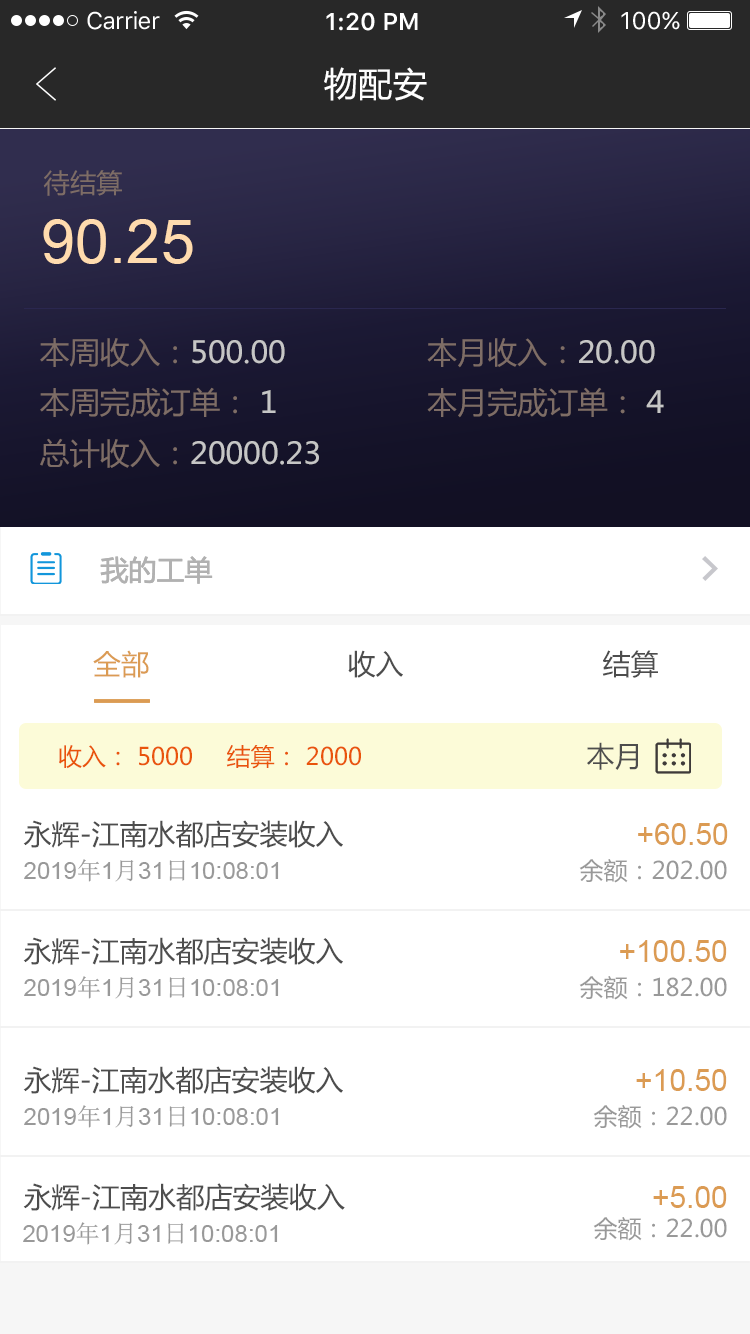
<style>
.page{position:relative;width:750px;height:1334px;background:#ffffff}
.page>*{position:absolute;margin:0}
.t1{font:24px "SFUIText-Regular";letter-spacing:-0.025em;color:#ffffff}
.t2{font:24px "SFUIText-Semibold";color:#ffffff}
.t3{font:24px "SFUIText-Regular";color:#ffffff}
.t4{font:34px "MicrosoftYaHei";letter-spacing:0.02em;color:#ffffff}
.t5{font:26px "MicrosoftYaHei";color:#7e6d66}
.t6{font:61.1px "ArialMT";color:#ffdbae}
.t7{font:30px/60px "MicrosoftYaHei";color:#c6c6c6}
.t8{font:30px/60px "MicrosoftYaHei";color:#7e6d66}
.t9{font:28px "MicrosoftYaHei";color:#b1b1b1}
.t10{font:28px "MicrosoftYaHei";color:#db9b53}
.t11{font:28px "MicrosoftYaHei";color:#4d4d4d}
.t12{font:24px "MicrosoftYaHei";color:#e9540b}
.t13{font:30px "ArialMT";color:#db9b53}
.t14{font:24px "ArialMT";color:#999999}
.t15{font:24px "SimSun";color:#999999}
.t16{font:24px "MicrosoftYaHei";color:#999999}
.t17{font:28.1px "MicrosoftYaHei";color:#4d4d4d}
</style>
<div class="page">
<p class="t1" style="left:87px;top:11px;width:73px;height:19px">Carrier</p>
<p class="t2" style="left:326px;top:12px;width:92px;height:19px">1:20 PM</p>
<p class="t3" style="left:621px;top:11px;width:59px;height:19px">100%</p>
<p class="t4" style="left:324px;top:67px;width:103px;height:34px">物配安</p>
<p class="t5" style="left:43px;top:170px;width:79px;height:26px">待结算</p>
<p class="t6" style="left:43px;top:219px;width:150px;height:45px">90.25</p>
<p class="t7" style="left:40px;top:338px;width:624px;height:130px"><span class="t8">本周收入：</span>500.00 <span class="t8">      本月收入：</span>20.00<br><span class="t8">本周完成订单： </span>1<span class="t8">       本月完成订单： </span>4<br><span class="t8">总计收入：</span>20000.23</p>
<p class="t9" style="left:100px;top:556px;width:113px;height:28px">我的工单</p>
<p class="t10" style="left:93px;top:650px;width:56px;height:28px">全部</p>
<p class="t11" style="left:348px;top:650px;width:55px;height:28px">收入</p>
<p class="t11" style="left:602px;top:650px;width:56px;height:28px">结算</p>
<p class="t12" style="left:59px;top:745px;width:302px;height:24px">收入： 5000 结算： 2000</p>
<p class="t11" style="left:587px;top:742px;width:51px;height:28px">本月</p>
<p class="t11" style="left:23px;top:820px;width:320px;height:28px">永辉-江南水都店安装收入</p>
<p class="t13" style="left:638px;top:823px;width:90px;height:22px">+60.50</p>
<p class="t14" style="left:24px;top:859px;width:255px;height:23px">2019<span class="t15">年</span>1<span class="t15">月</span>31<span class="t15">日</span>10:08:01</p>
<p class="t16" style="left:579px;top:859px;width:148px;height:24px">余额：202.00</p>
<p class="t11" style="left:23px;top:937px;width:320px;height:28px">永辉-江南水都店安装收入</p>
<p class="t13" style="left:620px;top:940px;width:107px;height:22px">+100.50</p>
<p class="t14" style="left:24px;top:976px;width:255px;height:23px">2019<span class="t15">年</span>1<span class="t15">月</span>31<span class="t15">日</span>10:08:01</p>
<p class="t16" style="left:579px;top:976px;width:148px;height:24px">余额：182.00</p>
<p class="t11" style="left:23px;top:1066px;width:320px;height:28px">永辉-江南水都店安装收入</p>
<p class="t13" style="left:636px;top:1069px;width:91px;height:22px">+10.50</p>
<p class="t14" style="left:24px;top:1105px;width:255px;height:23px">2019<span class="t15">年</span>1<span class="t15">月</span>31<span class="t15">日</span>10:08:01</p>
<p class="t16" style="left:593px;top:1105px;width:134px;height:24px">余额：22.00</p>
<p class="t17" style="left:23px;top:1183px;width:322px;height:28px">永辉-江南水都店安装收入</p>
<p class="t13" style="left:653px;top:1186px;width:74px;height:22px">+5.00</p>
<p class="t16" style="left:593px;top:1217px;width:134px;height:24px">余额：22.00</p>
<p class="t14" style="left:23px;top:1222px;width:255px;height:23px">2019<span class="t15">年</span>1<span class="t15">月</span>31<span class="t15">日</span>10:08:01</p>
</div>
